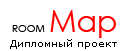
<style>
.page{position:relative;width:122px;height:51px;background:#ffffff}
.page>*{position:absolute;margin:0}
.t1{font:30px "CenturyGothic";color:#ff0000}
.t2{font:10px "CenturyGothic";color:#000000}
.t3{font:10px "Verdana";color:#000000}
</style>
<div class="page">
<p class="t1" style="left:50px;top:10px;width:66px;height:28px">Map</p>
<p class="t2" style="left:12px;top:25px;width:33px;height:7px">ROOM</p>
<p class="t3" style="left:10px;top:39px;width:107px;height:10px">Дипломный проект</p>
</div>
